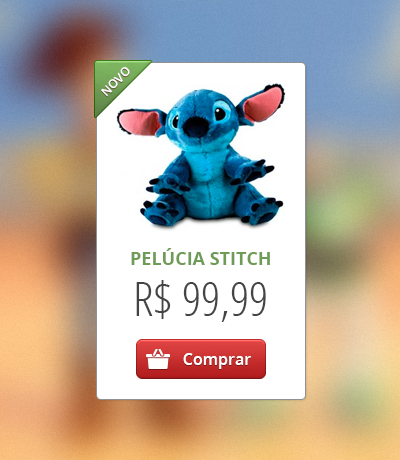
<style>
.page{position:relative;width:400px;height:460px;background:#ffffff}
.page>*{position:absolute;margin:0}
.t1{font:12px "OpenSans-Semibold";color:#ffffff}
.t2{font:18px "OpenSans-Bold";color:#6e9b56}
.t3{font:48px "OpenSans-CondensedLight";color:#444444}
.t4{font:16px "OpenSans-Semibold";color:#ffffff}
</style>
<div class="page">
<p class="t1" style="left:101px;top:67px;width:29px;height:30px;rotate:-45deg">NOVO</p>
<p class="t2" style="left:131px;top:248px;width:139px;height:17px">PELÚCIA STITCH</p>
<p class="t3" style="left:136px;top:280px;width:130px;height:42px">R$ 99,99</p>
<p class="t4" style="left:183px;top:353px;width:68px;height:16px">Comprar</p>
</div>
